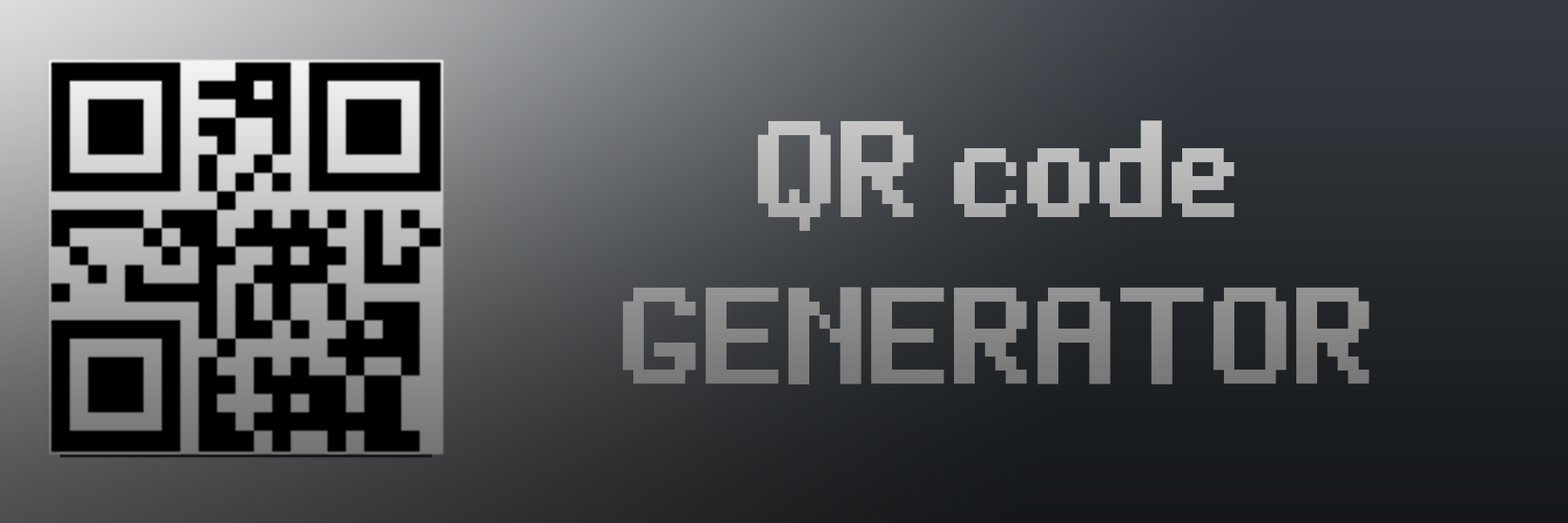
<style>
.page{position:relative;width:1568px;height:523px}
.page>*{position:absolute;margin:0}
.t1{font:138.1px "Bit-Darling10-(sRB)";scale:0.75 1}
</style>
<div class="page">
<p class="t1" style="left:623px;top:120px;width:746px;height:264px;text-align:center">QR code<br>GENERATOR</p>
</div>
